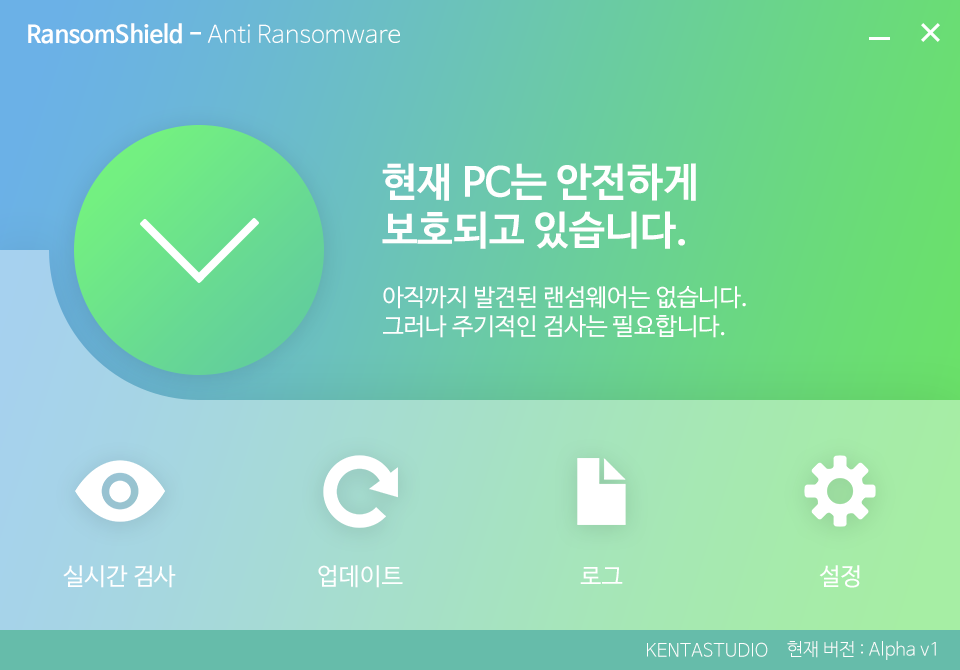
<style>
.page{position:relative;width:960px;height:670px}
.page>*{position:absolute;margin:0}
.t1{font:24px "NanumBarunGothicLight";color:#ffffff}
.t2{font:24px "NanumBarunGothicBold";color:#ffffff}
.t3{font:40px "NanumBarunGothicBold";color:#ffffff}
.t4{font:24px "NanumBarunGothic";color:#ffffff}
.t5{font:18px "NanumBarunGothicLight";color:#fefefe}
</style>
<div class="page">
<p class="t1" style="left:28px;top:23px;width:372px;height:21px"><span class="t2">RansomShield - </span>Anti Ransomware</p>
<p class="t3" style="left:382px;top:163px;width:314px;height:86px">현재 PC는 안전하게<br>보호되고 있습니다.</p>
<p class="t4" style="left:383px;top:286px;width:363px;height:52px">아직까지 발견된 랜섬웨어는 없습니다.<br>그러나 주기적인 검사는 필요합니다.</p>
<p class="t4" style="left:63px;top:565px;width:113px;height:23px">실시간 검사</p>
<p class="t4" style="left:318px;top:565px;width:85px;height:23px">업데이트</p>
<p class="t4" style="left:580px;top:567px;width:43px;height:17px">로그</p>
<p class="t4" style="left:819px;top:565px;width:41px;height:23px">설정</p>
<p class="t5" style="left:787px;top:641px;width:149px;height:19px">현재 버전 : Alpha v1</p>
<p class="t5" style="left:647px;top:642px;width:121px;height:15px">KENTASTUDIO</p>
</div>
